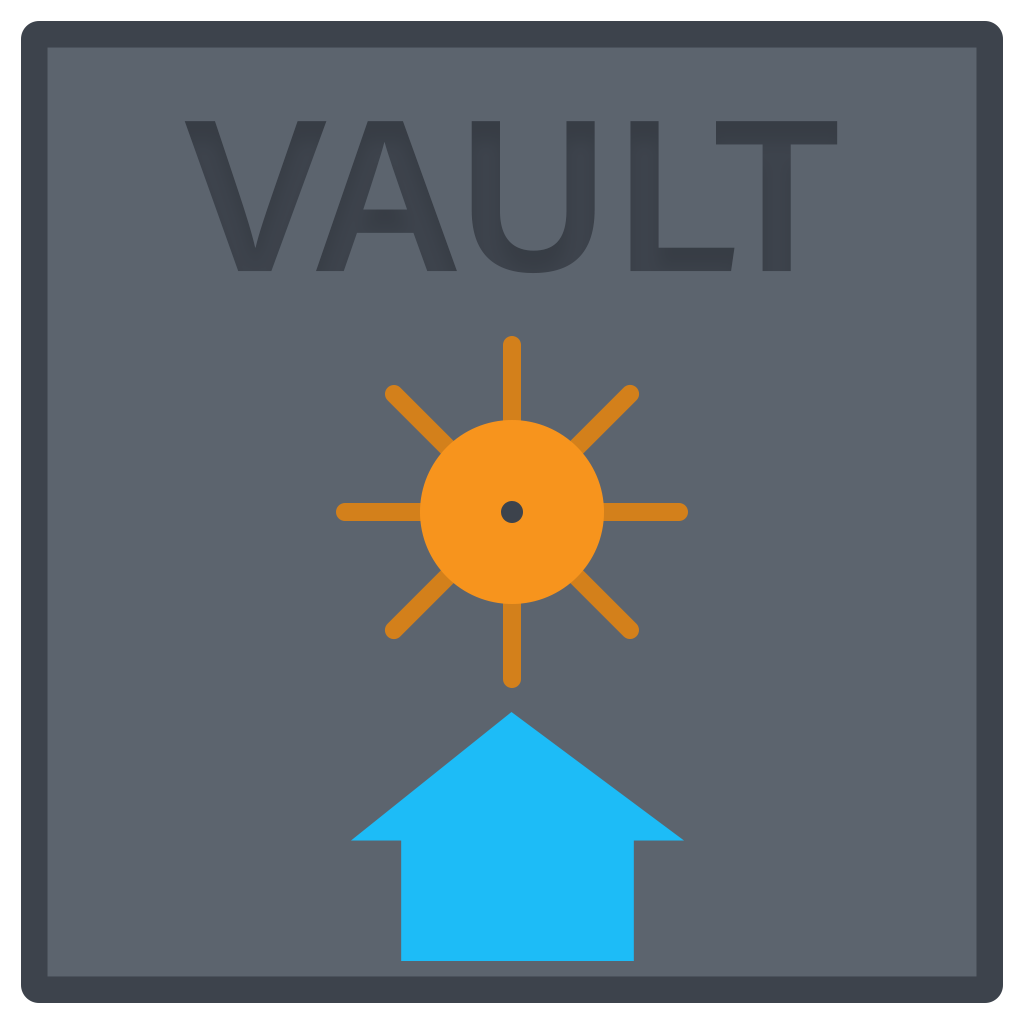
<style>
.page{position:relative;width:1024px;height:1024px;background:#5c646e}
.page>*{position:absolute;margin:0}
.t1{font:216.7px "AcuminConcept-Semibold";color:#3d434c}
</style>
<div class="page">
<p class="t1" style="left:184px;top:121px;width:654px;height:153px">VAULT</p>
</div>
